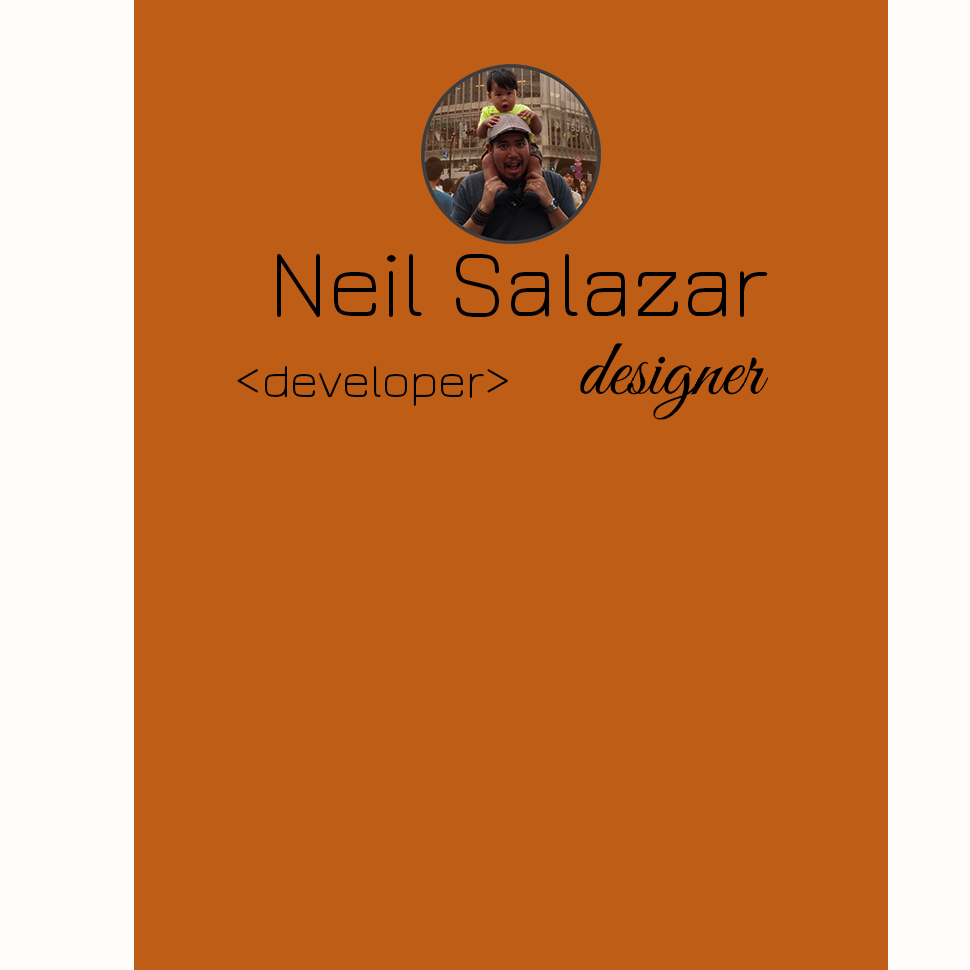
<style>
.page{position:relative;width:970px;height:970px;background:#be5d16}
.page>*{position:absolute;margin:0}
.t1{font:98px "JuraLight";color:#000000}
.t2{font:81px "GreatVibes-Regular";color:#000000}
.t3{font:50px "JuraLight";color:#000000}
</style>
<div class="page">
<p class="t1" style="left:277px;top:254px;width:491px;height:63px">Neil Salazar</p>
<p class="t2" style="left:580px;top:343px;width:189px;height:77px">designer</p>
<p class="t3" style="left:237px;top:366px;width:271px;height:40px">&lt;developer&gt;</p>
</div>
